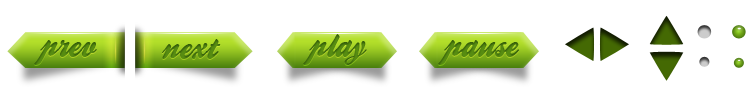
<style>
.page{position:relative;width:750px;height:100px;background:#ffffff}
.page>*{position:absolute;margin:0}
.t1{font:33.3px "BallparkWeiner";color:#578c11}
</style>
<div class="page">
<p class="t1" style="left:34px;top:40px;width:63px;height:25px">prev</p>
<p class="t1" style="left:162px;top:39px;width:59px;height:20px">next</p>
<p class="t1" style="left:303px;top:34px;width:64px;height:31px">play</p>
<p class="t1" style="left:438px;top:40px;width:81px;height:25px">pause</p>
</div>
